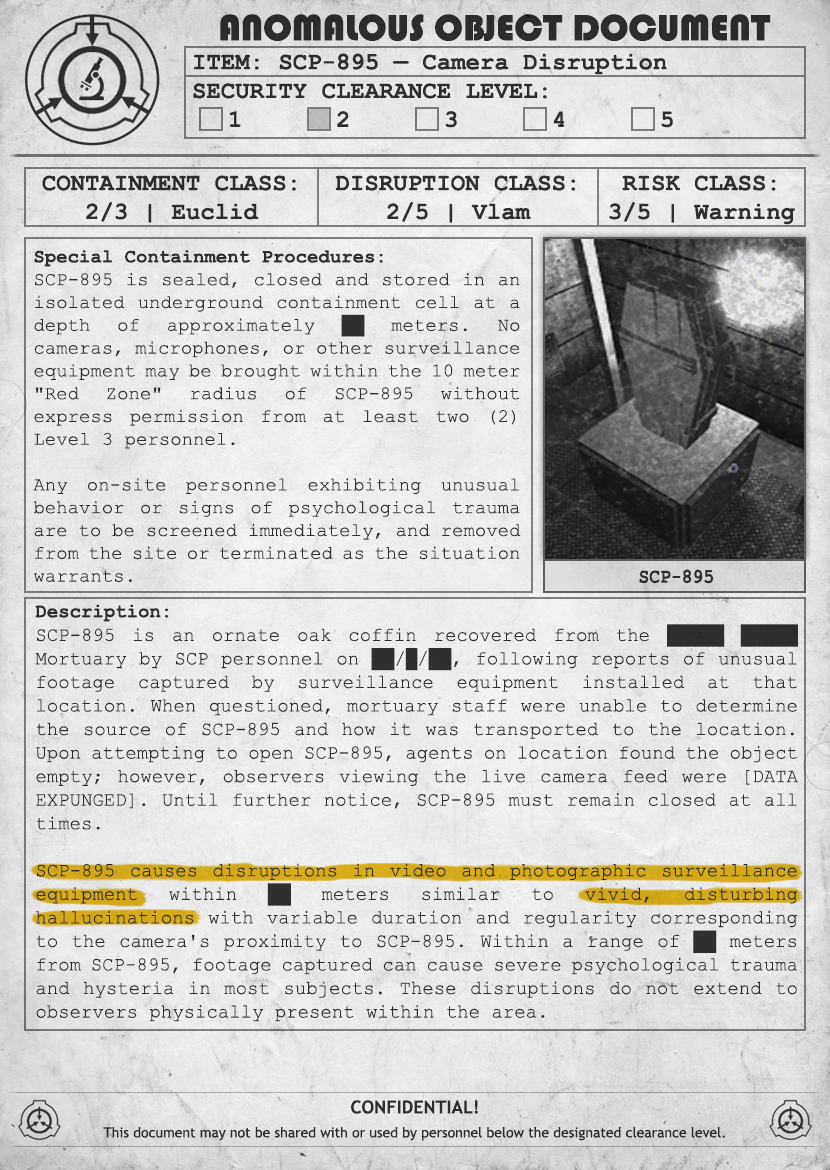
<style>
.page{position:relative;width:830px;height:1170px}
.page>*{position:absolute;margin:0}
.t1{font:38px "Bauhaus93";color:#333333;text-transform:uppercase}
.t2{font:24px "CourierNewPS-BoldMT";color:#333333}
.t3{font:24px "CourierNewPS-BoldMT";color:#333333;text-transform:uppercase}
.t4{font:19px "CourierNewPSMT";color:#333333}
.t5{font:19px "CourierNewPS-BoldMT";color:#333333}
.t6{font:20.1px "CourierNewPS-BoldMT";color:#333333;scale:0.9 1}
.t7{font:19.6px "CourierNewPSMT";color:#333333;scale:0.97 1}
.t8{font:19.6px "CourierNewPS-BoldMT";color:#333333;scale:0.97 1}
.t9{font:14px/24px "TrebuchetMS";color:#333333}
.t10{font:18px/24px "TrebuchetMS-Bold";color:#333333}
</style>
<div class="page">
<p class="t1" style="left:220px;top:14px;width:551px;height:27px">anomalous object document</p>
<p class="t2" style="left:193px;top:53px;width:480px;height:75px">ITEM: SCP-895 — Camera Disruption<br><span class="t3">Security CLEARANCE LEVEL:</span> <br> 1   2   3   4   5</p>
<p class="t2" style="left:42px;top:175px;width:254px;height:48px;text-align:center">CONTAINMENT CLASS:<br>2/3 | Euclid</p>
<p class="t2" style="left:335px;top:175px;width:241px;height:48px;text-align:center">DISRUPTION CLASS:<br>2/5 | Vlam</p>
<p class="t2" style="left:609px;top:175px;width:186px;height:50px;text-align:center">RISK CLASS:<br>3/5 | Warning</p>
<p class="t4" style="left:33px;top:250px;width:488px;height:332px;text-align:justify"><span class="t5">Special Containment Procedures:<br></span>SCP-895 is sealed, closed and stored in an isolated underground containment cell at a depth of approximately ██ meters. No cameras, microphones, or other surveillance equipment may be brought within the 10 meter "Red Zone" radius of SCP-895 without express permission from at least two (2) Level 3 personnel.<br><br>Any on-site personnel exhibiting unusual behavior or signs of psychological trauma are to be screened immediately, and removed from the site or terminated as the situation warrants.</p>
<p class="t6" style="left:639px;top:569px;width:74px;height:15px">SCP-895</p>
<p class="t7" style="left:35px;top:604px;width:763px;height:418px;text-align:justify"><span class="t8">Description:<br></span>SCP-895 is an ornate oak coffin recovered from the █████ █████ Mortuary by SCP personnel on ██/█/██, following reports of unusual footage captured by surveillance equipment installed at that location. When questioned, mortuary staff were unable to determine the source of SCP-895 and how it was transported to the location. Upon attempting to open SCP-895, agents on location found the object empty; however, observers viewing the live camera feed were [DATA EXPUNGED]. Until further notice, SCP-895 must remain closed at all times.<br><br>SCP-895 causes disruptions in video and photographic surveillance equipment within ██ meters similar to vivid, disturbing hallucinations with variable duration and regularity corresponding to the camera's proximity to SCP-895. Within a range of ██ meters from SCP-895, footage captured can cause severe psychological trauma and hysteria in most subjects. These disruptions do not extend to observers physically present within the area.</p>
<p class="t9" style="left:103px;top:1100px;width:622px;height:41px;text-align:center"><span class="t10">CONFIDENTIAL!<br></span>This document may not be shared with or used by personnel below the designated clearance level.</p>
</div>
